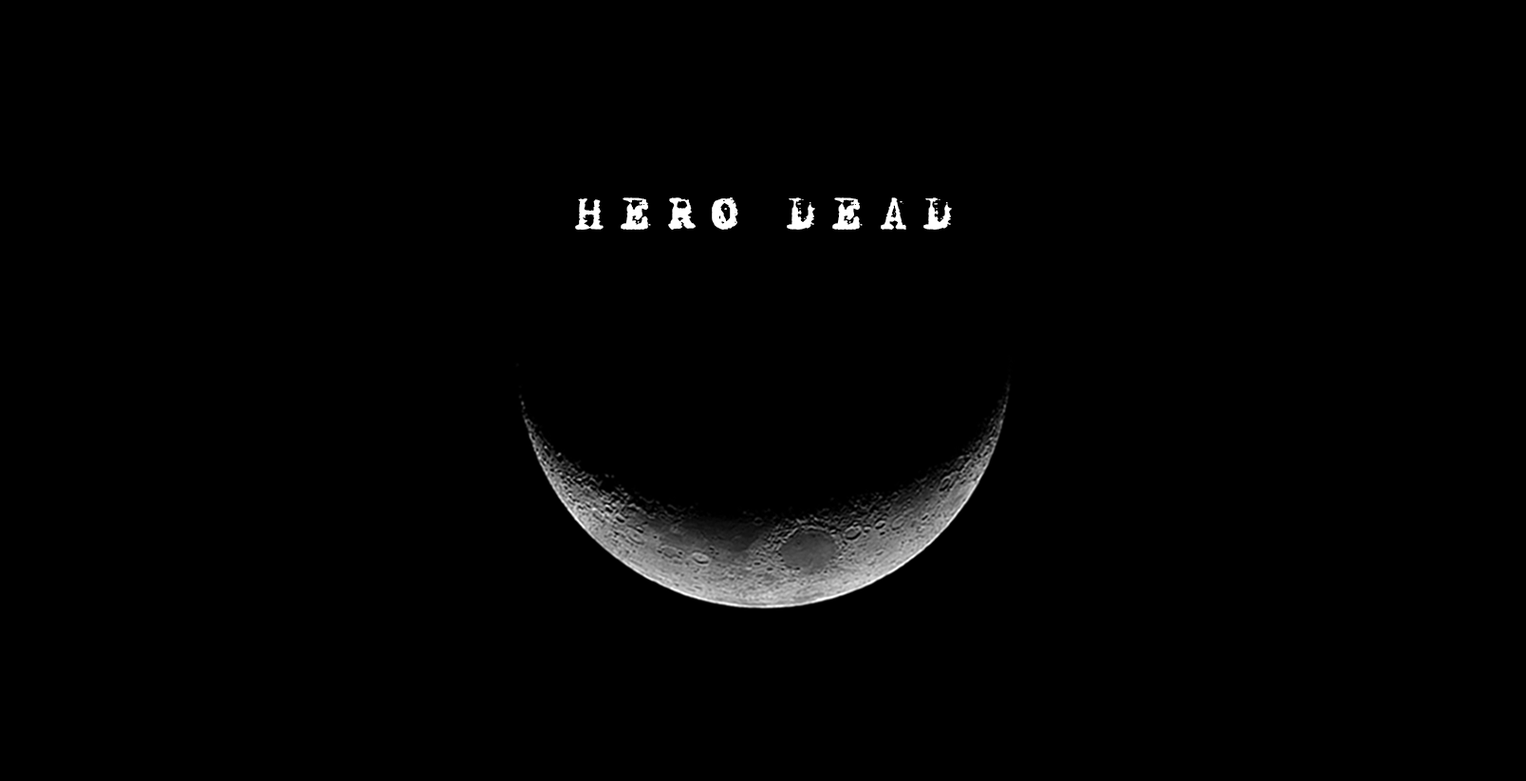
<style>
.page{position:relative;width:1526px;height:781px;background:#000000}
.page>*{position:absolute;margin:0}
.t1{font:45.6px "X-Classified";color:#ffffff}
</style>
<div class="page">
<p class="t1" style="left:575px;top:197px;width:377px;height:33px">H E R O   D E A D</p>
</div>
